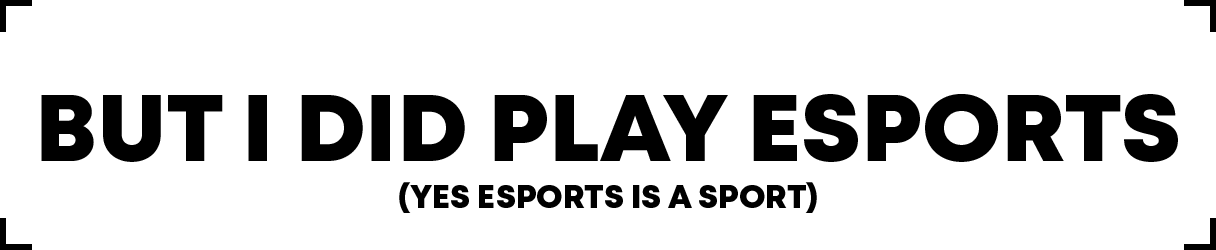
<style>
.page{position:relative;width:1216px;height:250px;background:#ffffff}
.page>*{position:absolute;margin:0}
.t1{font:95px "Mont-HeavyDEMO";color:#000000}
.t2{font:32.1px "Mont-HeavyDEMO";color:#000000}
</style>
<div class="page">
<p class="t1" style="left:41px;top:94px;width:1137px;height:68px">BUT I DID PLAY ESPORTS</p>
<p class="t2" style="left:399px;top:182px;width:418px;height:31px">(YES ESPORTS IS A SPORT)</p>
</div>
